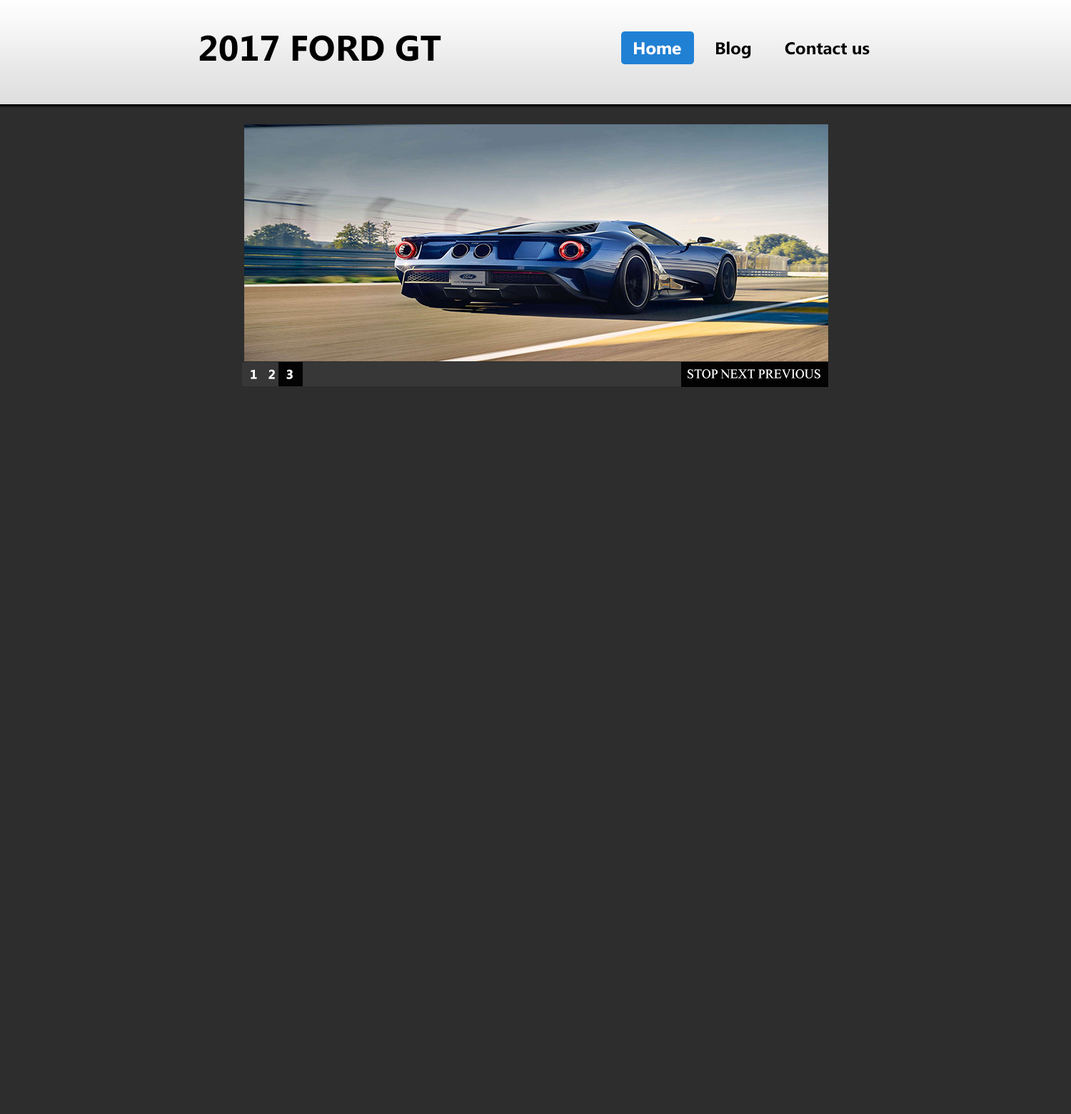
<style>
.page{position:relative;width:1071px;height:1114px;background:#2d2d2d}
.page>*{position:absolute;margin:0}
.t1{font:35.7px "MicrosoftTaiLe-Bold";color:#000000}
.t2{font:17.1px "MicrosoftTaiLe-Bold";color:#000000}
.t3{font:17.1px "MicrosoftTaiLe-Bold";color:#ffffff}
.t4{font:12.8px "MicrosoftTaiLe-Bold";color:#ffffff}
.t5{font:12.8px "MongolianBaiti";color:#ffffff}
</style>
<div class="page">
<p class="t1" style="left:199px;top:35px;width:242px;height:26px">2017 FORD GT</p>
<p class="t2" style="left:716px;top:41px;width:35px;height:18px">Blog</p>
<p class="t3" style="left:634px;top:42px;width:47px;height:13px">Home</p>
<p class="t2" style="left:785px;top:42px;width:84px;height:13px">Contact us</p>
<p class="t4" style="left:251px;top:369px;width:42px;height:10px">1   2   3</p>
<p class="t5" style="left:687px;top:369px;width:133px;height:9px">STOP NEXT PREVIOUS</p>
</div>
